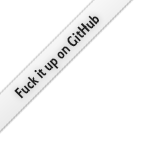
<style>
.page{position:relative;width:149px;height:149px;background:#ffffff}
.page>*{position:absolute;margin:0}
.t1{font:16px "Collegiate";color:#1f1f1f}
</style>
<div class="page">
<p class="t1" style="left:14px;top:15px;width:85px;height:84px;rotate:-45deg">Fuck it up on GitHub</p>
</div>
